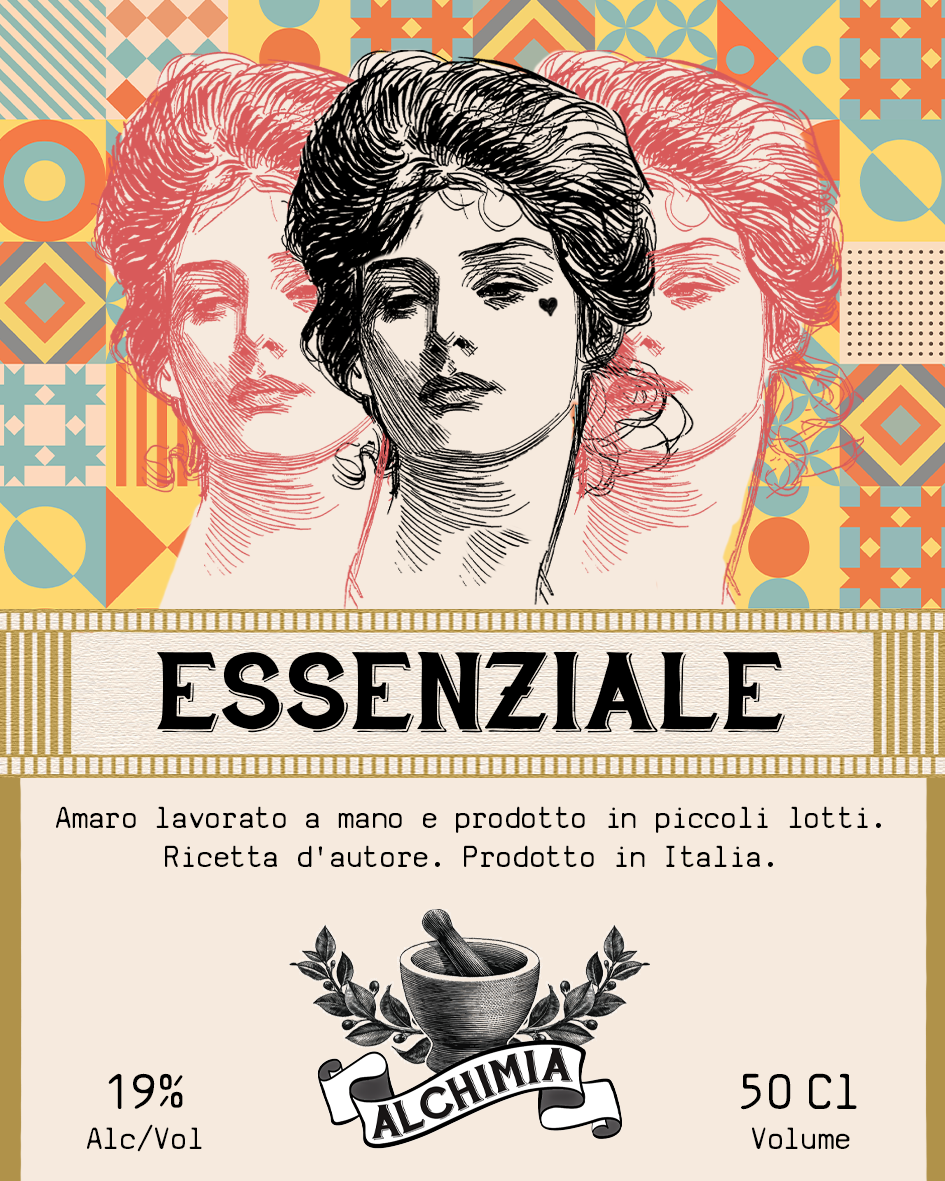
<style>
.page{position:relative;width:945px;height:1181px;background:#f6eade}
.page>*{position:absolute;margin:0}
.t1{font:110.4px "HandShopTypographyC30_demo";color:#000000}
.t2{font:32.9px "SVBasicManual";color:#000000}
.t3{font:33.3px "SVBasicManual";color:#000000}
.t4{font:54.2px "SVBasicManual";color:#000000}
</style>
<div class="page">
<p class="t1" style="left:157px;top:651px;width:628px;height:82px">ESSENZIALE</p>
<p class="t2" style="left:56px;top:806px;width:825px;height:61px;text-align:center">Amaro lavorato a mano e prodotto in piccoli lotti. <br>Ricetta d'autore. Prodotto in Italia.</p>
<p class="t3" style="left:87px;top:1073px;width:115px;height:79px;text-align:center"><span class="t4">19% <br></span>Alc/Vol</p>
<p class="t3" style="left:741px;top:1073px;width:116px;height:76px;text-align:center"><span class="t4">50 Cl<br></span>Volume</p>
</div>
